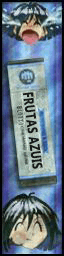
<style>
.page{position:relative;width:64px;height:256px}
.page>*{position:absolute;margin:0}
.t1{font:14px "MicrosoftPhagsPa-Bold";color:#181c19;text-transform:uppercase;font-weight:bold;scale:0.77 1}
</style>
<div class="page">
<p class="t1" style="left:22px;top:92px;width:21px;height:77px;rotate:83deg">Frutas Azuis</p>
</div>
